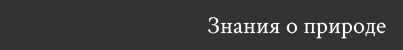
<style>
.page{position:relative;width:403px;height:50px;background:#333333}
.page>*{position:absolute;margin:0}
.t1{font:24px "CrimsonText-Regular";color:#ffffff}
</style>
<div class="page">
<p class="t1" style="left:208px;top:17px;width:178px;height:22px">Знания о природе</p>
</div>
